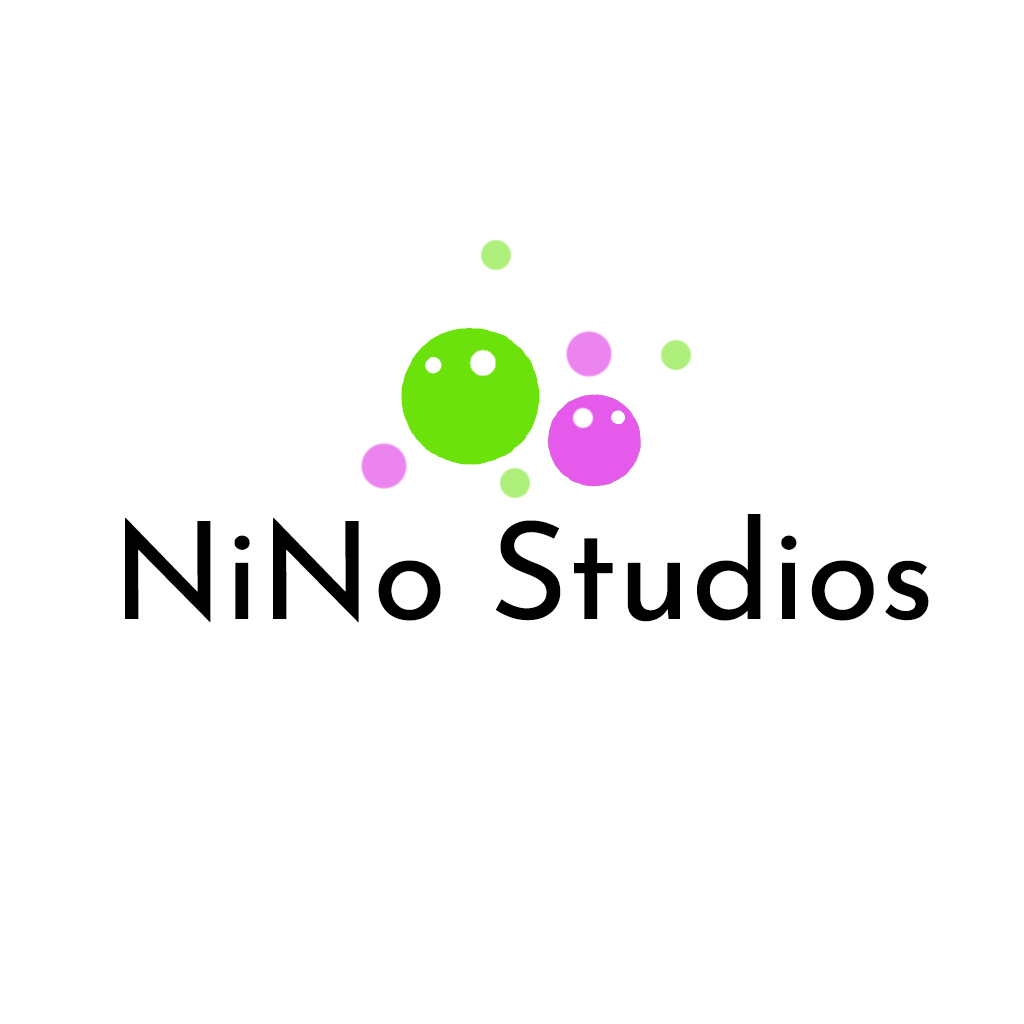
<style>
.page{position:relative;width:1024px;height:1024px;background:#ffffff}
.page>*{position:absolute;margin:0}
.t1{font:135.5px "JosefinSans-Regular";color:#000000}
</style>
<div class="page">
<p class="t1" style="left:125px;top:514px;width:804px;height:109px">NiNo Studios</p>
</div>
